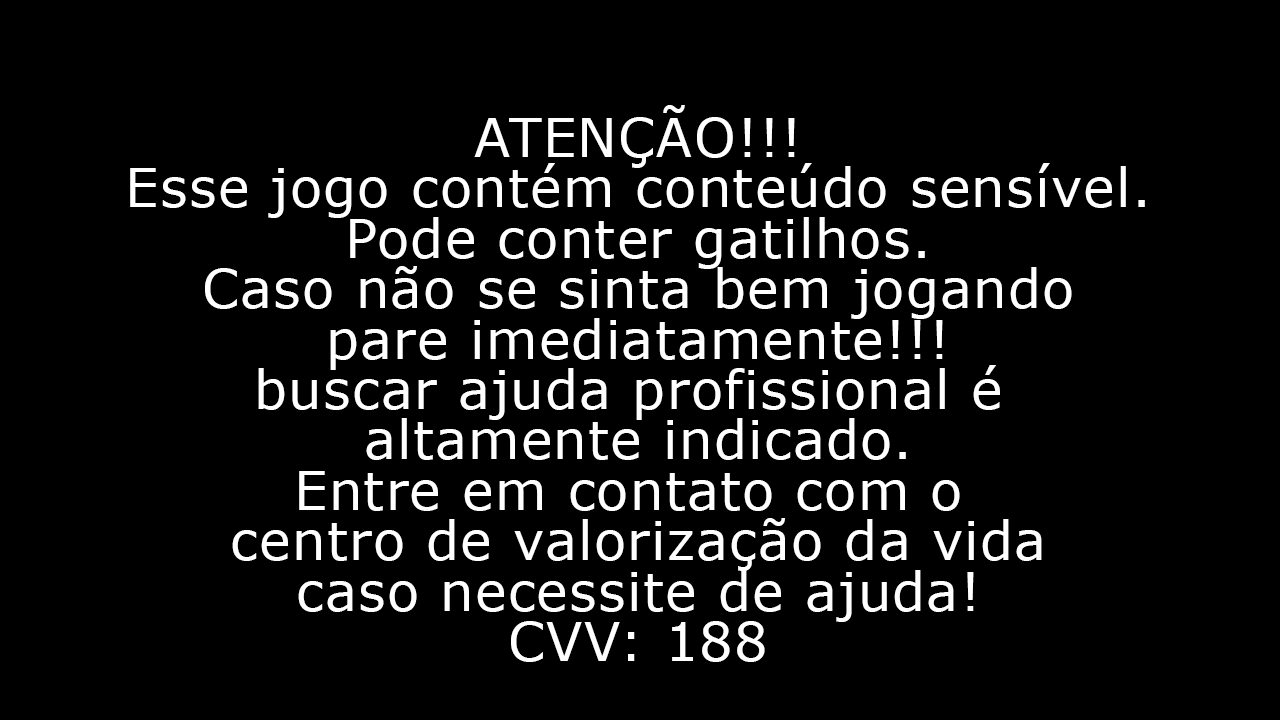
<style>
.page{position:relative;width:1280px;height:720px;background:#000000}
.page>*{position:absolute;margin:0}
.t1{font:52.5px "Verdana";letter-spacing:0.029em;color:#ffffff}
</style>
<div class="page">
<p class="t1" style="left:130px;top:105px;width:1015px;height:557px;text-align:center">ATENÇÃO!!!<br>Esse jogo contém conteúdo sensível.<br>Pode conter gatilhos.<br>Caso não se sinta bem jogando<br>pare imediatamente!!!<br>buscar ajuda profissional é <br>altamente indicado.<br>Entre em contato com o <br>centro de valorização da vida<br>caso necessite de ajuda!<br>CVV: 188</p>
</div>
